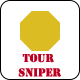
<style>
.page{position:relative;width:80px;height:80px;background:#ffffff}
.page>*{position:absolute;margin:0}
.t1{font:12px "Stencil";color:#bd0022}
</style>
<div class="page">
<p class="t1" style="left:18px;top:53px;width:43px;height:24px;text-align:center">Tour <br>sniper</p>
</div>
